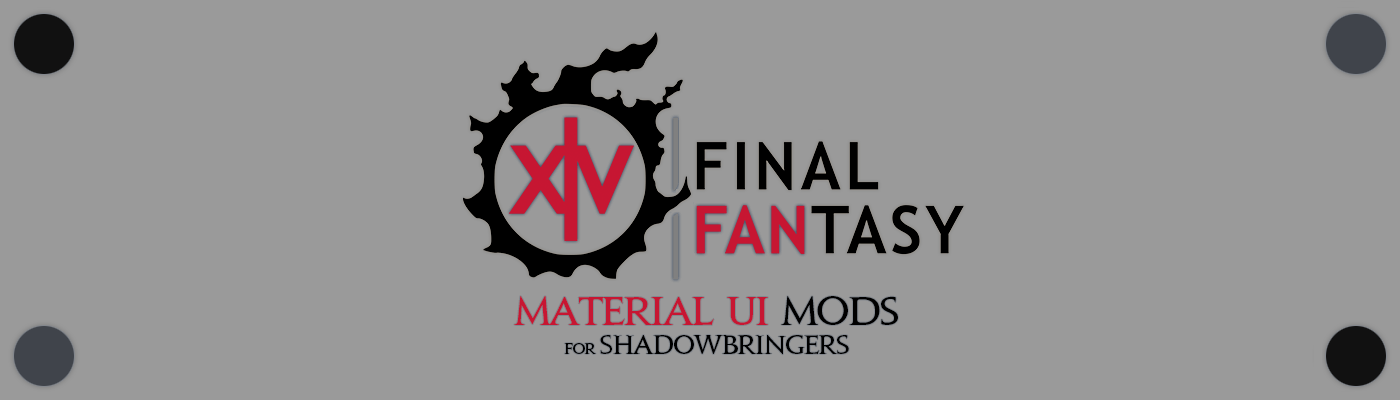
<style>
.page{position:relative;width:1400px;height:400px;background:#9a9a9a}
.page>*{position:absolute;margin:0}
.t1{font:24px "JupiterPro-Bold";letter-spacing:-0.05em;color:#000000}
.t2{font:36px "JupiterPro-Bold";letter-spacing:-0.05em;color:#c71632}
.t3{font:36px "JupiterPro-Bold";letter-spacing:-0.05em;color:#000000}
.t4{font:14px "JupiterPro-Bold";letter-spacing:-0.05em;color:#000000}
</style>
<div class="page">
<p class="t1" style="left:514px;top:296px;width:384px;height:59px;text-align:center"><span class="t2">material ui </span><span class="t3">mods<br></span><span class="t4">for </span>shadowbringers</p>
</div>
